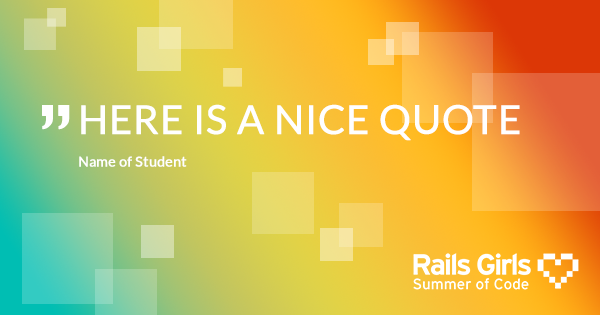
<style>
.page{position:relative;width:600px;height:315px}
.page>*{position:absolute;margin:0}
.t1{font:84px "LucidaBright";color:#ffffff;text-transform:uppercase;font-weight:bold}
.t2{font:40px "Lato-Regular";color:#ffffff;text-transform:uppercase;font-weight:bold}
.t3{font:14px "Lato-Regular";color:#ffffff;font-weight:bold}
</style>
<div class="page">
<p class="t1" style="left:42px;top:105px;width:28px;height:25px">”</p>
<p class="t2" style="left:81px;top:104px;width:439px;height:37px">here is a nice quote</p>
<p class="t3" style="left:79px;top:156px;width:108px;height:11px">Name of Student</p>
</div>
